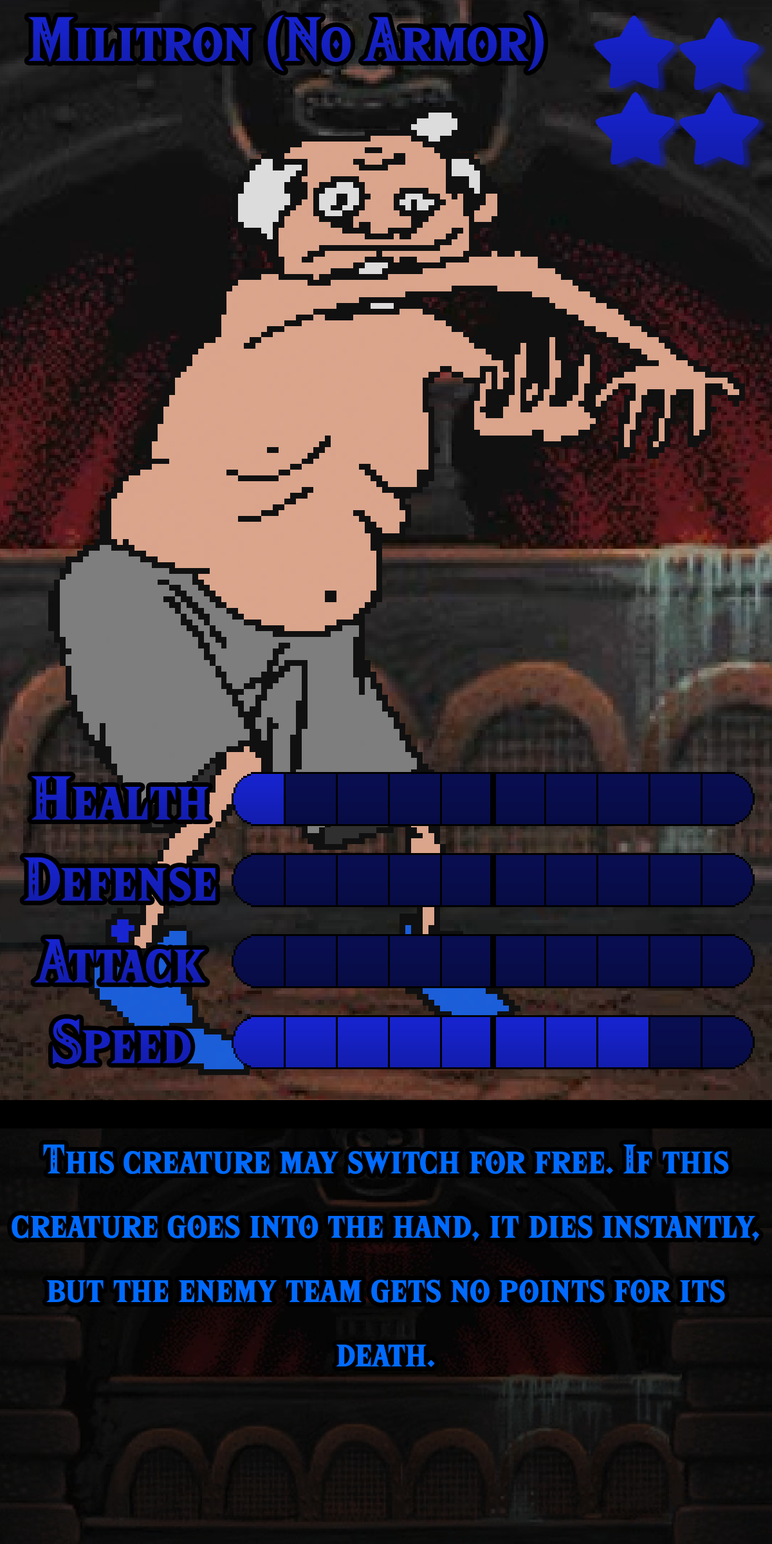
<style>
.page{position:relative;width:772px;height:1544px}
.page>*{position:absolute;margin:0}
.t1{font:93.9px "HyliaSerifBeta-Regular";color:#1521bf}
.t2{font:92.7px "HyliaSerifBeta-Regular";color:#1520bb}
.t3{font:92.7px "HyliaSerifBeta-Regular";color:#1520bc}
.t4{font:61.8px/64.3px "HyliaSerifBeta-Regular";color:#006aff}
</style>
<div class="page">
<p class="t1" style="left:28px;top:15px;width:516px;height:56px">Militron (No Armor)</p>
<p class="t2" style="left:32px;top:776px;width:176px;height:44px">Health</p>
<p class="t3" style="left:24px;top:857px;width:192px;height:45px">Defense</p>
<p class="t2" style="left:35px;top:939px;width:171px;height:45px">Attack</p>
<p class="t2" style="left:53px;top:1019px;width:138px;height:46px">Speed</p>
<p class="t4" style="left:12px;top:1145px;width:747px;height:222px;text-align:center">This creature may switch for free. If this creature goes into the hand, it dies instantly, but the enemy team gets no points for its death.</p>
</div>
